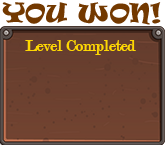
<style>
.page{position:relative;width:165px;height:145px}
.page>*{position:absolute;margin:0}
.t1{font:25px "Ravie";color:#733900}
.t2{font:16.7px "Modern-Regular";color:#ffd801}
</style>
<div class="page">
<p class="t1" style="left:2px;top:2px;width:159px;height:23px">YOU WON!</p>
<p class="t2" style="left:25px;top:40px;width:111px;height:15px">Level Completed</p>
</div>
